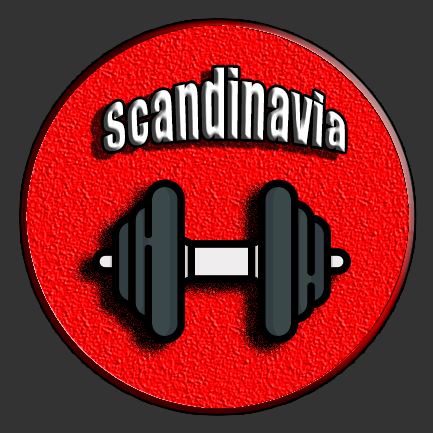
<style>
.page{position:relative;width:433px;height:433px;background:#333333}
.page>*{position:absolute;margin:0}
.t1{font:48px "Impact"}
</style>
<div class="page">
<p class="t1" style="left:103px;top:67px;width:242px;height:85px">Scandinavia</p>
</div>
